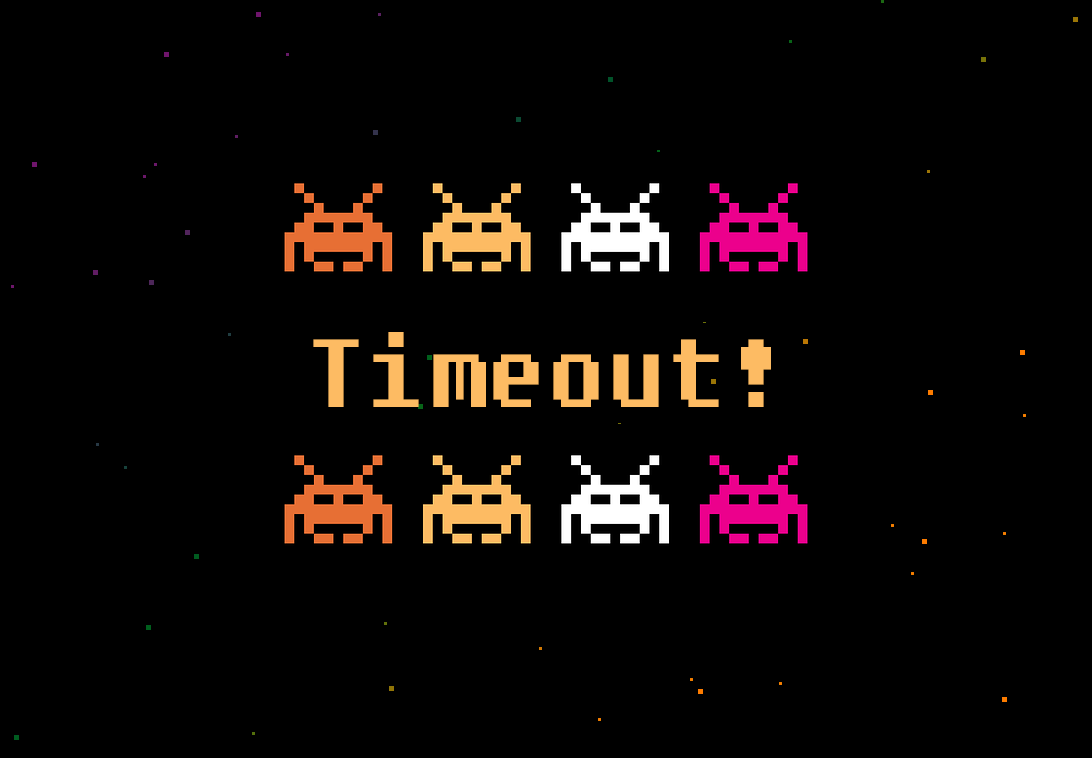
<style>
.page{position:relative;width:1092px;height:758px;background:#000000}
.page>*{position:absolute;margin:0}
.t1{font:96px "Fixedsys";color:#fdbb63}
</style>
<div class="page">
<p class="t1" style="left:313px;top:332px;width:458px;height:75px">Timeout!</p>
</div>
